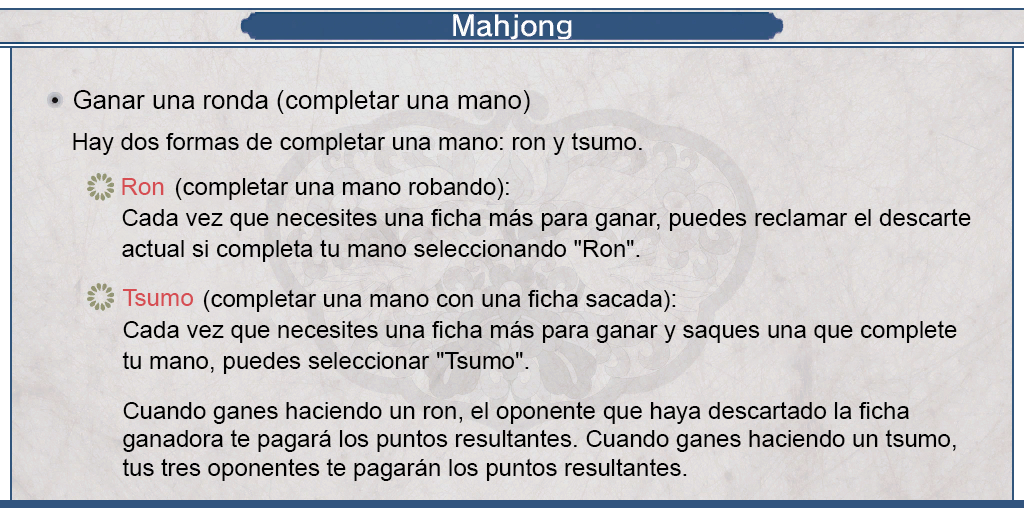
<style>
.page{position:relative;width:1024px;height:512px}
.page>*{position:absolute;margin:0}
.t1{font:26px "ArialMT";color:#000000}
.t2{font:24px "ArialMT";color:#000000}
.t3{font:24px/31px "ArialMT";color:#000000}
.t4{font:24px "ArialMT";color:#d64d52}
</style>
<div class="page">
<p class="t1" style="left:74px;top:90px;width:456px;height:24px">Ganar una ronda (completar una mano)</p>
<p class="t2" style="left:73px;top:132px;width:569px;height:23px">Hay dos formas de completar una mano: ron y tsumo.</p>
<p class="t3" style="left:122px;top:177px;width:849px;height:85px;text-align:justify">(completar una mano robando):<br>Cada vez que necesites una ficha más para ganar, puedes reclamar el descarte <br>actual si completa tu mano seleccionando "Ron".</p>
<p class="t4" style="left:122px;top:178px;width:42px;height:17px">Ron</p>
<p class="t3" style="left:122px;top:289px;width:835px;height:85px;text-align:justify">(completar una mano con una ficha sacada):<br>Cada vez que necesites una ficha más para ganar y saques una que complete <br>tu mano, puedes seleccionar "Tsumo".</p>
<p class="t4" style="left:122px;top:289px;width:72px;height:17px">Tsumo</p>
<p class="t2" style="left:122px;top:401px;width:834px;height:80px;text-align:justify">Cuando ganes haciendo un ron, el oponente que haya descartado la ficha<br>ganadora te pagará los puntos resultantes. Cuando ganes haciendo un tsumo,<br>tus tres oponentes te pagarán los puntos resultantes.</p>
</div>
